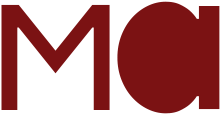
<style>
.page{position:relative;width:221px;height:116px;background:#7b1213}
.page>*{position:absolute;margin:0}
.t1{font:150px "TTFirs-Bold";letter-spacing:0.005em;color:#7b1213}
.t2{font:214.5px "TTFirs-Bold";letter-spacing:0.005em;color:#7b1213}
</style>
<div class="page">
<p class="t1" style="left:1px;top:4px;width:109px;height:106px">M</p>
<p class="t2" style="left:117px;top:1px;width:103px;height:113px">a</p>
</div>
